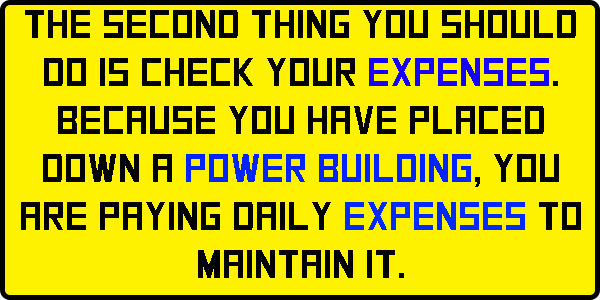
<style>
.page{position:relative;width:600px;height:300px;background:#fff200}
.page>*{position:absolute;margin:0}
.t1{font:40px "SquareFont";color:#000000}
.t2{font:40px "SquareFont";color:#1800ff}
.t3{font:40px "SquareFont";color:#0024ff}
.t4{font:40px "SquareFont";color:#002aff}
</style>
<div class="page">
<p class="t1" style="left:21px;top:10px;width:560px;height:268px;text-align:center">The second thing you should do is check your <span class="t2">expenses</span>. Because you have placed down a <span class="t3">power building</span>, you are paying daily <span class="t4">expenses</span> to maintain it.</p>
</div>
